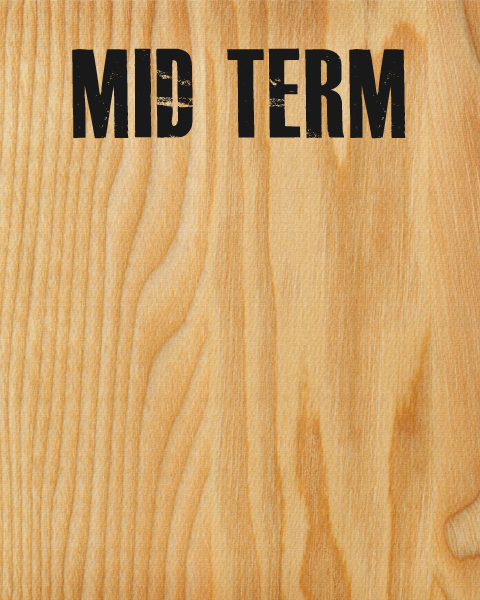
<style>
.page{position:relative;width:480px;height:600px}
.page>*{position:absolute;margin:0}
.t1{font:124.5px "MASTERPLAN-TRIAL";color:#191919}
</style>
<div class="page">
<p class="t1" style="left:72px;top:48px;width:334px;height:91px">Mid Term</p>
</div>
